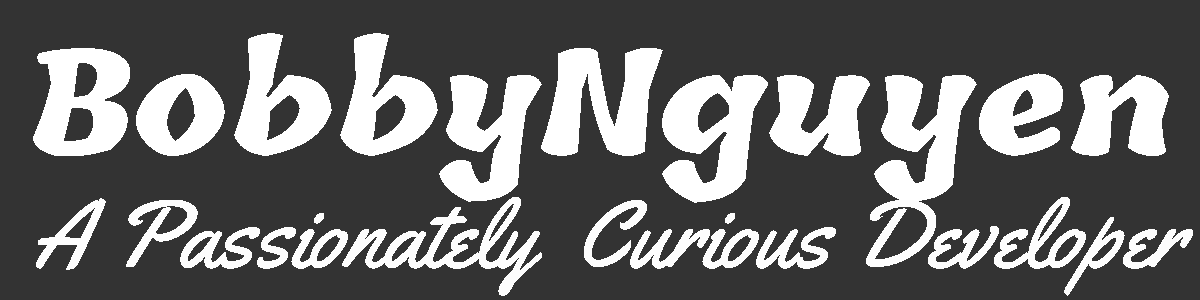
<style>
.page{position:relative;width:1200px;height:300px;background:#333333}
.page>*{position:absolute;margin:0}
.t1{font:144px "Tillana-ExtraBold";color:#ffffff}
.t2{font:96px "Yellowtail-Regular";color:#fdfdfd}
</style>
<div class="page">
<p class="t1" style="left:33px;top:33px;width:1136px;height:170px">BobbyNguyen</p>
<p class="t2" style="left:36px;top:197px;width:1157px;height:99px">A Passionately  Curious Developer</p>
</div>
